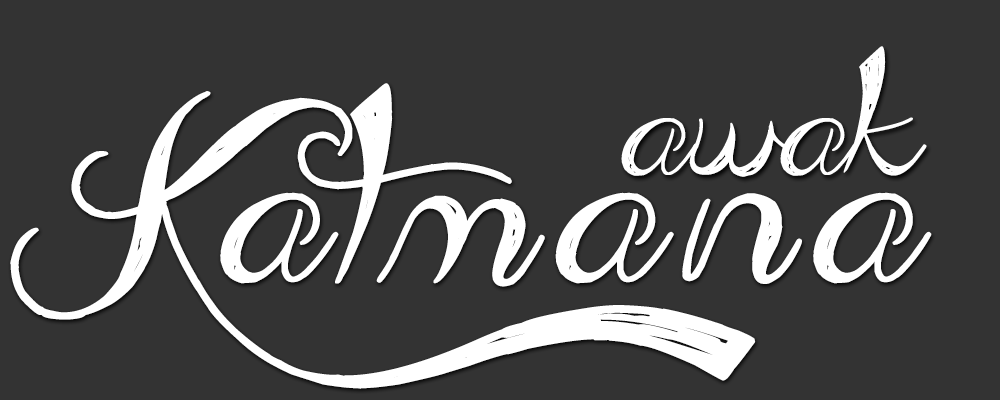
<style>
.page{position:relative;width:1000px;height:400px;background:#333333}
.page>*{position:absolute;margin:0}
.t1{font:115px "AdmirationPains";letter-spacing:-0.002em;color:#ffffff}
.t2{font:177.5px "AdmirationPains";letter-spacing:0.1em;color:#ffffff;font-weight:bold}
</style>
<div class="page">
<p class="t1" style="left:621px;top:46px;width:306px;height:131px">awak</p>
<p class="t2" style="left:10px;top:83px;width:922px;height:306px">Katmana</p>
</div>
